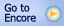
<style>
.page{position:relative;width:64px;height:26px}
.page>*{position:absolute;margin:0}
.t1{font:10.5px/10px "Tahoma";color:#00164a}
</style>
<div class="page">
<p class="t1" style="left:4px;top:3px;width:32px;height:19px">Go to<br>Encore</p>
</div>
